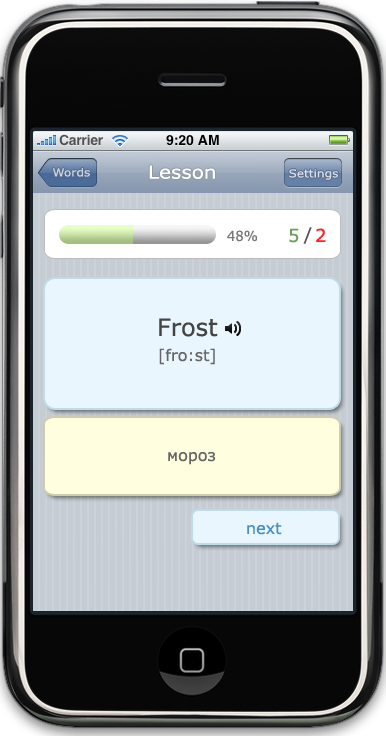
<style>
.page{position:relative;width:386px;height:742px}
.page>*{position:absolute;margin:0}
.t1{font:11px "Verdana";color:#d1d5db;scale:1.1 1}
.t2{font:18px "Verdana";color:#ffffff;scale:1.11 1}
.t3{font:11px "Verdana";color:#dbdfe5;scale:1.1 1}
.t4{font:14px "Verdana";color:#777777;scale:0.94 1}
.t5{font:18px "Verdana";color:#66a159}
.t6{font:18px "Verdana";color:#555555}
.t7{font:18px "Verdana";color:#ff2126}
.t8{font:24px "Verdana";color:#444444}
.t9{font:16px "Verdana";color:#666666}
.t10{font:16px "Verdana";color:#458fc6}
</style>
<div class="page">
<p class="t1" style="left:53px;top:168px;width:37px;height:9px">Words</p>
<p class="t2" style="left:149px;top:165px;width:66px;height:14px">Lesson</p>
<p class="t3" style="left:289px;top:169px;width:49px;height:11px">Settings</p>
<p class="t4" style="left:227px;top:230px;width:30px;height:12px">48%</p>
<p class="t5" style="left:289px;top:228px;width:10px;height:15px">5</p>
<p class="t6" style="left:303px;top:227px;width:9px;height:17px">/</p>
<p class="t7" style="left:316px;top:228px;width:10px;height:14px">2</p>
<p class="t8" style="left:159px;top:318px;width:59px;height:19px">Frost</p>
<p class="t9" style="left:159px;top:348px;width:56px;height:17px">[fro:st]</p>
<p class="t9" style="left:168px;top:452px;width:48px;height:13px">мороз</p>
<p class="t10" style="left:247px;top:522px;width:35px;height:13px">next</p>
</div>
